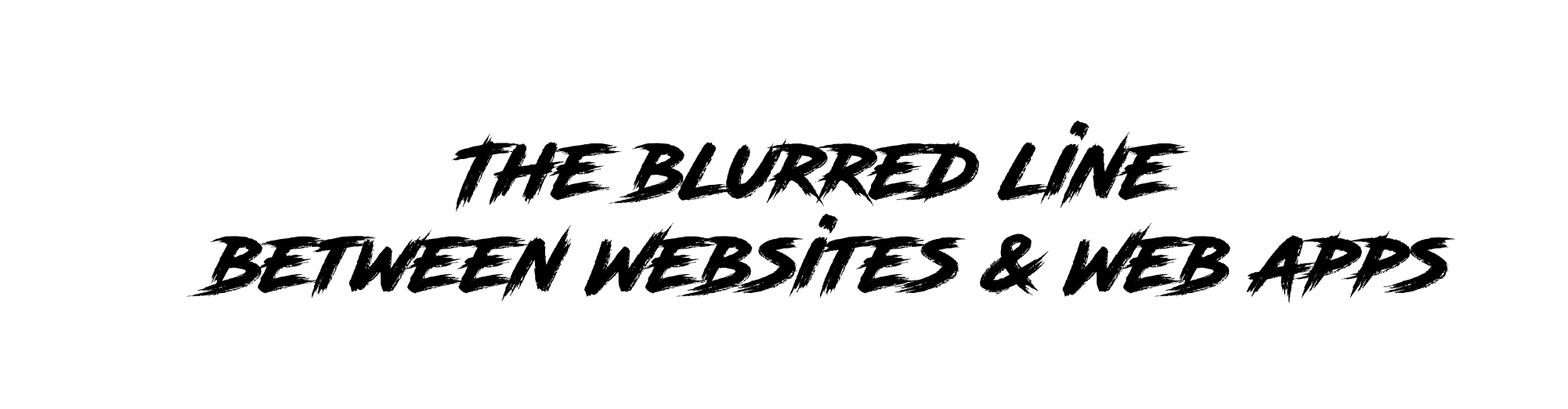
<style>
.page{position:relative;width:1568px;height:409px;background:#ffffff}
.page>*{position:absolute;margin:0}
.t1{font:77.5px "RoadRage";color:#000000}
</style>
<div class="page">
<p class="t1" style="left:186px;top:120px;width:1269px;height:182px;text-align:center">The blurred line <br>between Websites &amp; Web apps</p>
</div>
